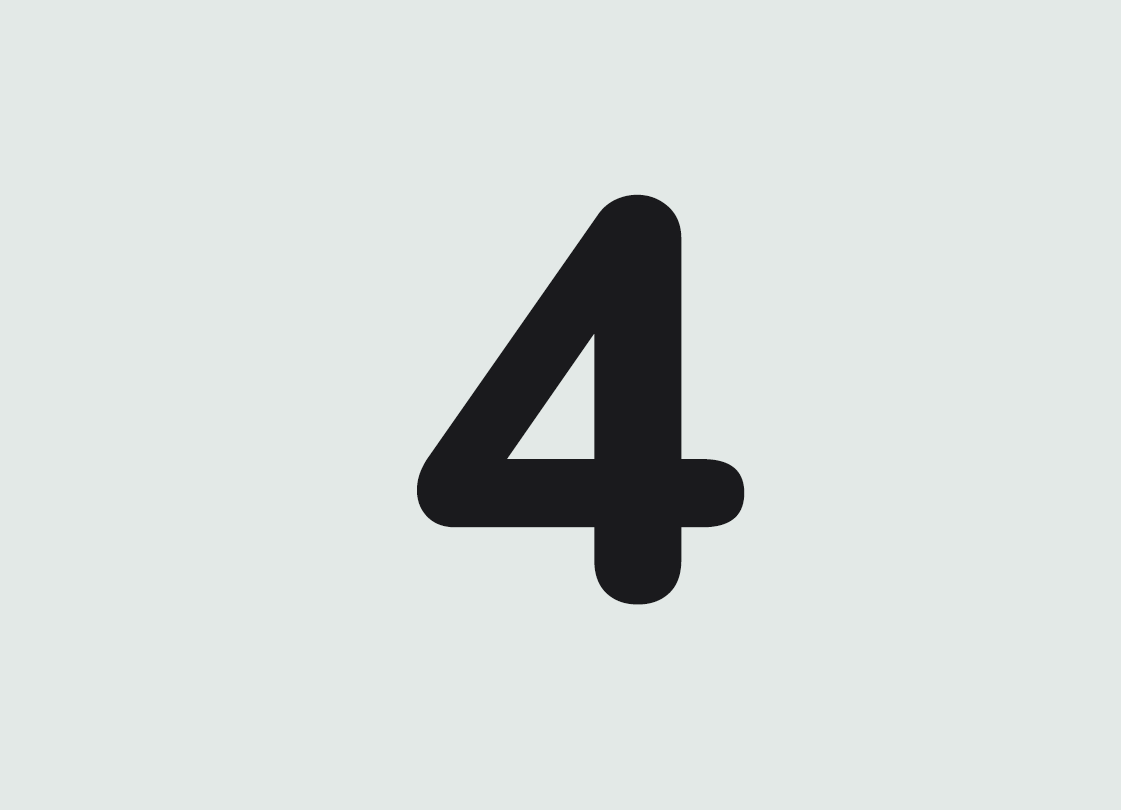
<style>
.page{position:relative;width:1121px;height:810px;background:#e3e9e7}
.page>*{position:absolute;margin:0}
.t1{font:572px "Nunito-ExtraBold";letter-spacing:0.2em;color:#1a1a1d}
</style>
<div class="page">
<p class="t1" style="left:417px;top:194px;width:328px;height:411px">4</p>
</div>
